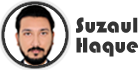
<style>
.page{position:relative;width:139px;height:70px;background:#ffffff}
.page>*{position:absolute;margin:0}
.t1{font:22px "Bauhaus93";color:#333333}
</style>
<div class="page">
<p class="t1" style="left:76px;top:17px;width:62px;height:16px">Suzaul</p>
<p class="t1" style="left:76px;top:37px;width:62px;height:20px">Haque</p>
</div>
